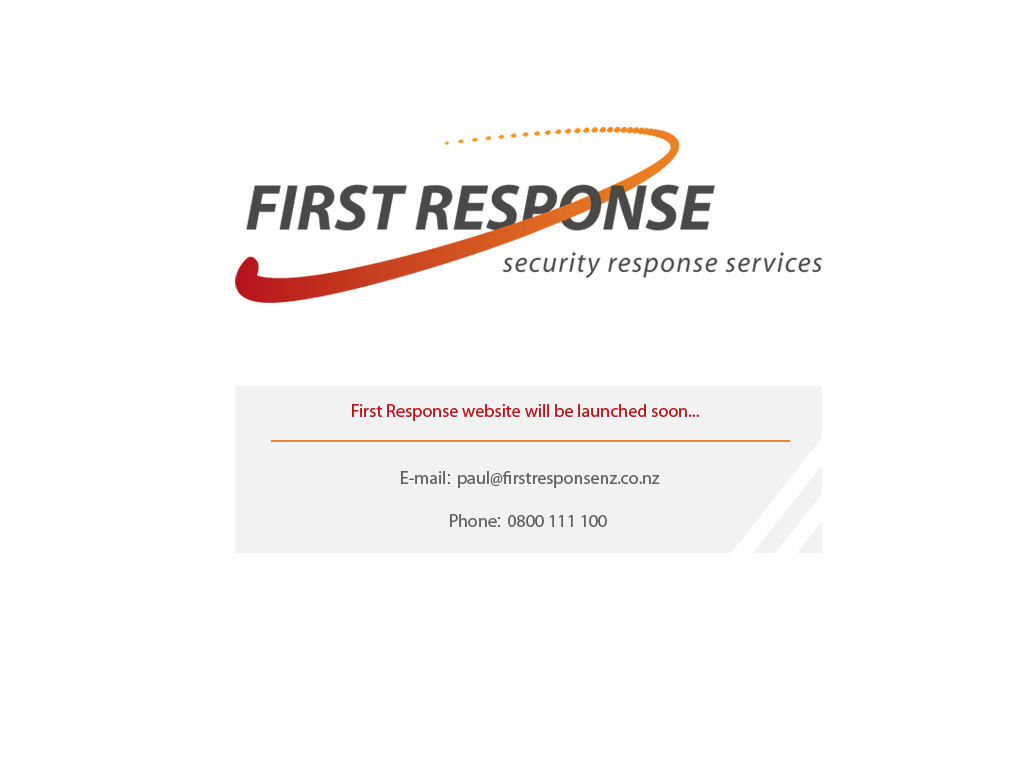
<style>
.page{position:relative;width:1024px;height:768px;background:#ffffff}
.page>*{position:absolute;margin:0}
.t1{font:18px "MyriadPro-Regular";color:#b7161c}
.t2{font:18px "MyriadPro-Regular";color:#616161}
.t3{font:18px "HiraKakuProN-W3";color:#616161}
</style>
<div class="page">
<p class="t1" style="left:352px;top:404px;width:347px;height:17px">First Response website will be launched soon...</p>
<p class="t2" style="left:401px;top:471px;width:259px;height:56px;text-align:center">E-mail<span class="t3">: </span>paul@firstresponsenz.co.nz<br><br>Phone<span class="t3">: </span>0800 111 100</p>
</div>
